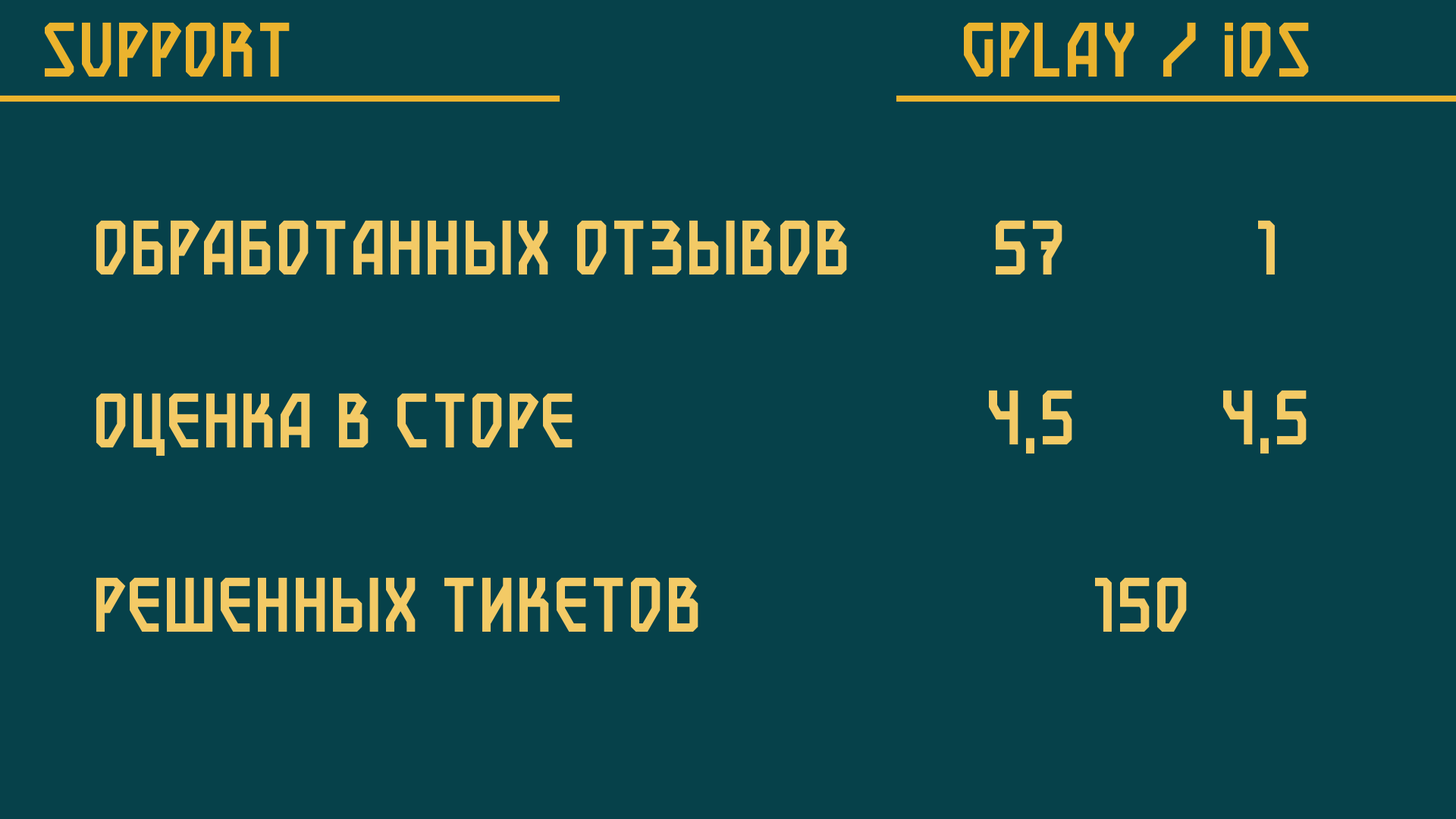
<style>
.page{position:relative;width:1456px;height:819px;background:#06414a}
.page>*{position:absolute;margin:0}
.t1{font:84.9px "mr_NeverSmile-NeverSmile";color:#ebb32e;text-transform:uppercase}
.t2{font:84.9px "mr_NeverSmile-NeverSmile";color:#f3ca66;text-transform:uppercase}
</style>
<div class="page">
<p class="t1" style="left:45px;top:22px;width:245px;height:55px">sUPPORT</p>
<p class="t1" style="left:964px;top:22px;width:345px;height:55px">gplay / ios</p>
<p class="t2" style="left:96px;top:220px;width:751px;height:55px">ОБРАБОТАННЫХ ОТЗЫВОВ</p>
<p class="t2" style="left:996px;top:220px;width:66px;height:55px">57</p>
<p class="t2" style="left:1258px;top:220px;width:17px;height:55px">1</p>
<p class="t2" style="left:989px;top:390px;width:83px;height:64px">4,5</p>
<p class="t2" style="left:1223px;top:390px;width:84px;height:64px">4,5</p>
<p class="t2" style="left:96px;top:393px;width:477px;height:63px">оЦЕНКА В СТОРЕ</p>
<p class="t2" style="left:96px;top:577px;width:602px;height:55px">РЕШЕННЫХ ТИКЕТОВ</p>
<p class="t2" style="left:1095px;top:577px;width:92px;height:55px">150</p>
</div>
